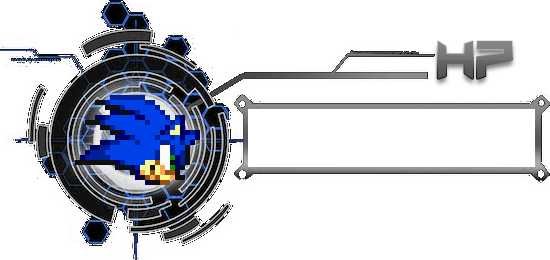
<style>
.page{position:relative;width:550px;height:260px;background:#ffffff}
.page>*{position:absolute;margin:0}
.t1{font:55px "Nero";letter-spacing:0.03em;color:#747474;text-transform:uppercase}
</style>
<div class="page">
<p class="t1" style="left:437px;top:41px;width:76px;height:38px">hp</p>
</div>
